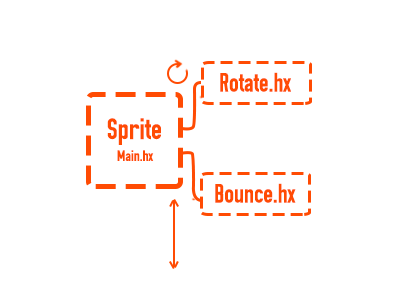
<style>
.page{position:relative;width:400px;height:289px;background:#ffffff}
.page>*{position:absolute;margin:0}
.t1{font:26.6px "OSP-DIN";color:#ff4b03}
.t2{font:29.4px "OSP-DIN";color:#ff4b03}
.t3{font:15.2px "OSP-DIN";color:#ff4b03}
</style>
<div class="page">
<p class="t1" style="left:220px;top:72px;width:71px;height:20px">Rotate.hx</p>
<p class="t2" style="left:107px;top:118px;width:54px;height:27px">Sprite</p>
<p class="t3" style="left:117px;top:150px;width:37px;height:11px">Main.hx</p>
<p class="t1" style="left:215px;top:183px;width:81px;height:20px">Bounce.hx</p>
</div>
